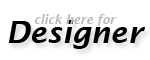
<style>
.page{position:relative;width:150px;height:60px;background:#ffffff}
.page>*{position:absolute;margin:0}
.t1{font:12px "LucidaSans-DemiItalic";color:#bab6b6}
.t2{font:30px "LucidaSans-DemiItalic";color:#020202}
</style>
<div class="page">
<p class="t1" style="left:34px;top:14px;width:83px;height:12px">click here for</p>
<p class="t2" style="left:8px;top:20px;width:137px;height:29px">Designer</p>
</div>
